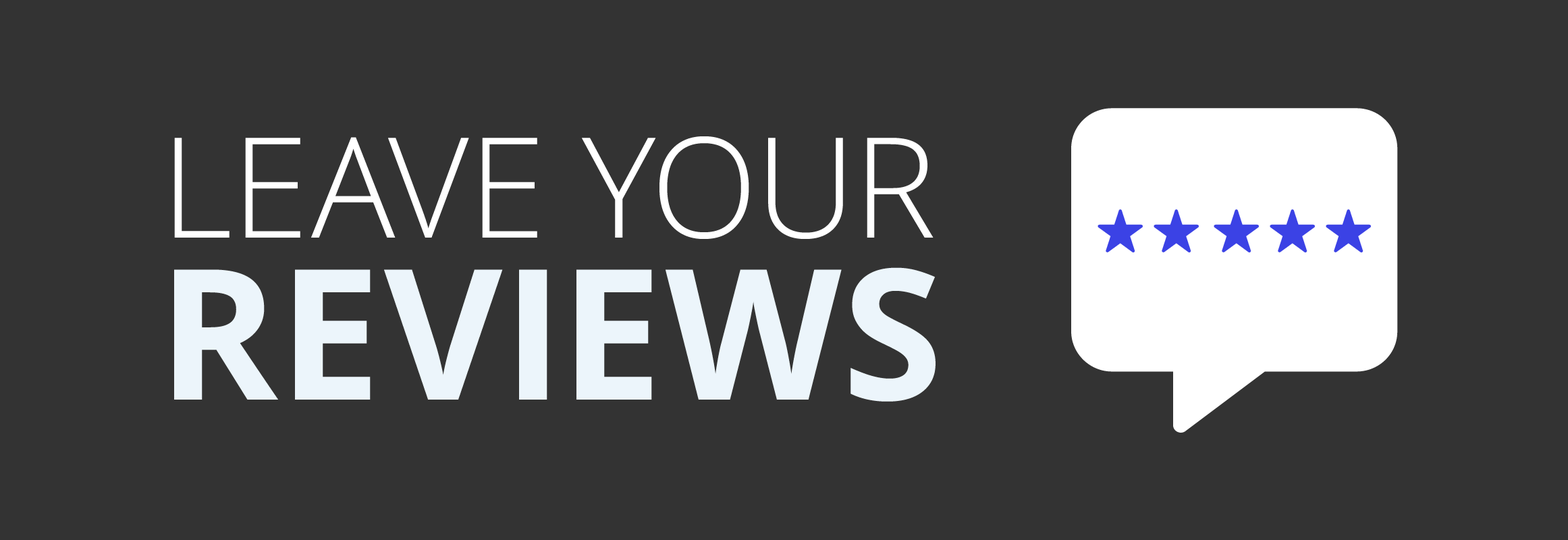
<style>
.page{position:relative;width:1568px;height:540px;background:#333333}
.page>*{position:absolute;margin:0}
.t1{font:139.7px "OpenSans-Light";color:#ffffff;text-transform:uppercase}
.t2{font:181.9px "OpenSans-Bold";color:#ffffff;text-transform:uppercase}
</style>
<div class="page">
<p class="t1" style="left:174px;top:136px;width:760px;height:103px">LEAVE YOUR</p>
<p class="t2" style="left:174px;top:267px;width:762px;height:135px">REVIEWS</p>
</div>
